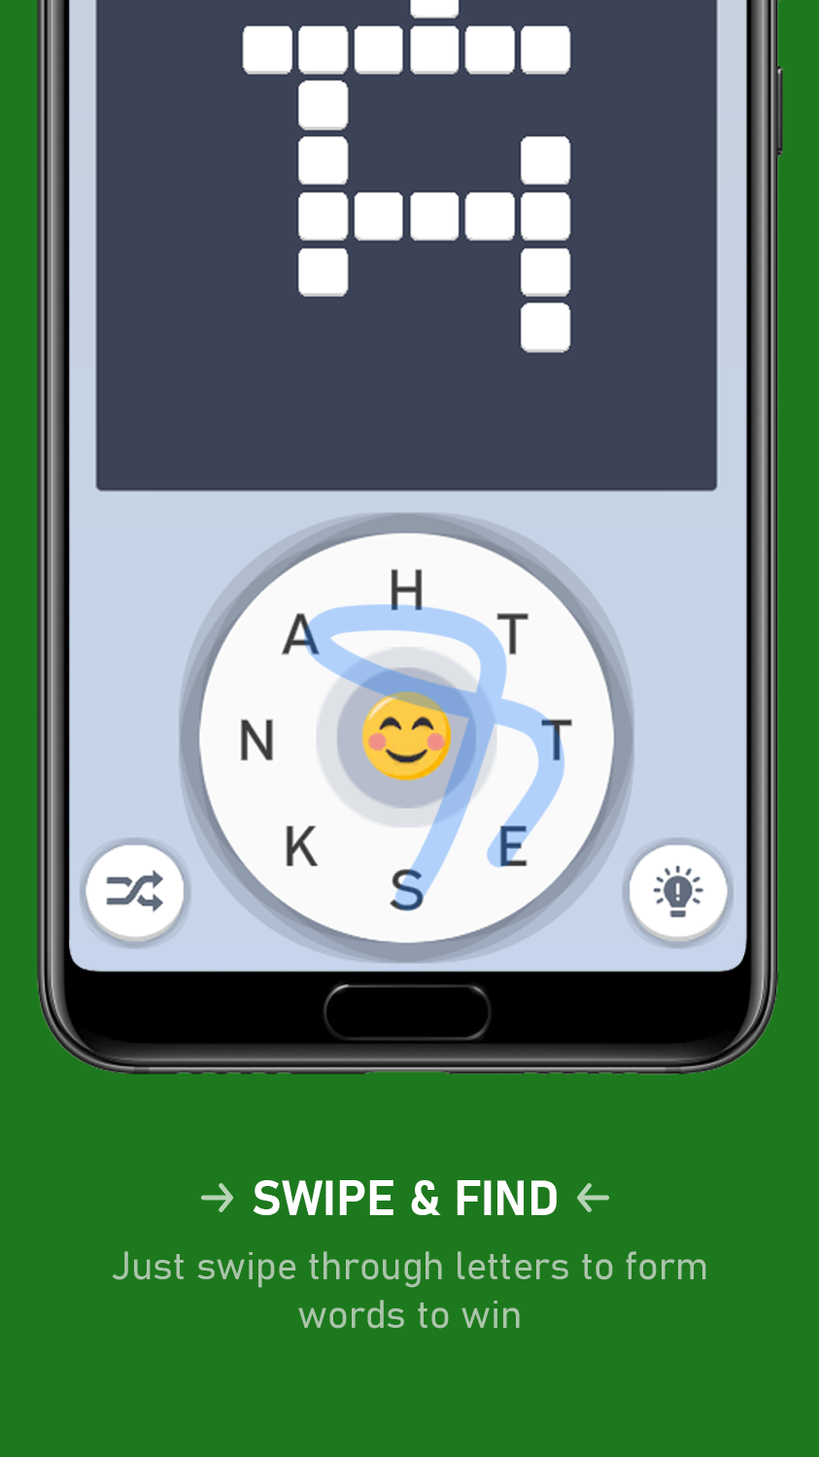
<style>
.page{position:relative;width:819px;height:1457px;background:#1d791d}
.page>*{position:absolute;margin:0}
.t1{font:48.6px "Bahnschrift-Bold";color:#ffffff}
.t2{font:38.8px/48.6px "Bahnschrift-SemiLight";color:#aac5aa}
</style>
<div class="page">
<p class="t1" style="left:252px;top:1180px;width:304px;height:35px">SWIPE &amp; FIND</p>
<p class="t2" style="left:112px;top:1251px;width:594px;height:77px;text-align:center">Just swipe through letters to form words to win</p>
</div>
